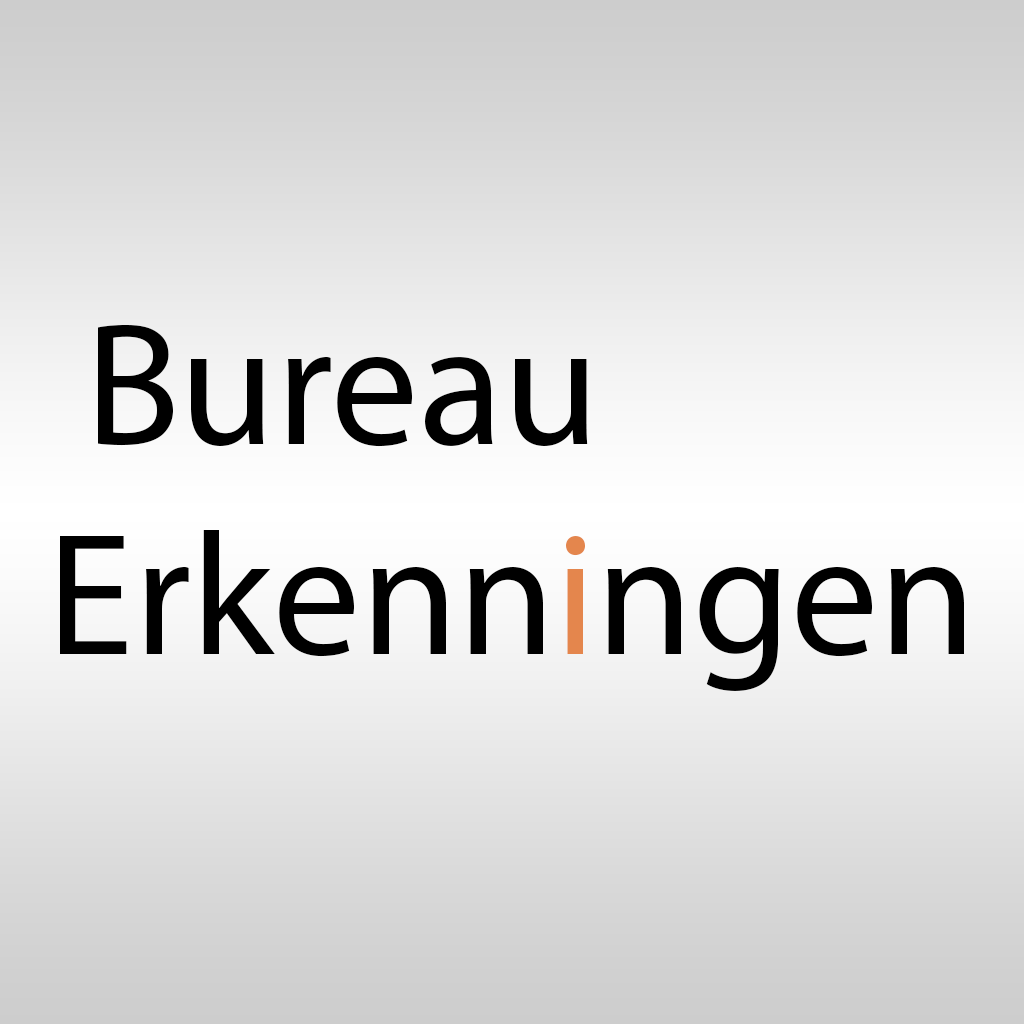
<style>
.page{position:relative;width:1024px;height:1024px}
.page>*{position:absolute;margin:0}
.t1{font:174.9px "MyriadPro-Regular";color:#000000}
.t2{font:174.9px "MyriadPro-Regular";color:#e4864d}
</style>
<div class="page">
<p class="t1" style="left:60px;top:325px;width:904px;height:366px">Bureau <br>Erkenn<span class="t2">i</span>ngen</p>
</div>
